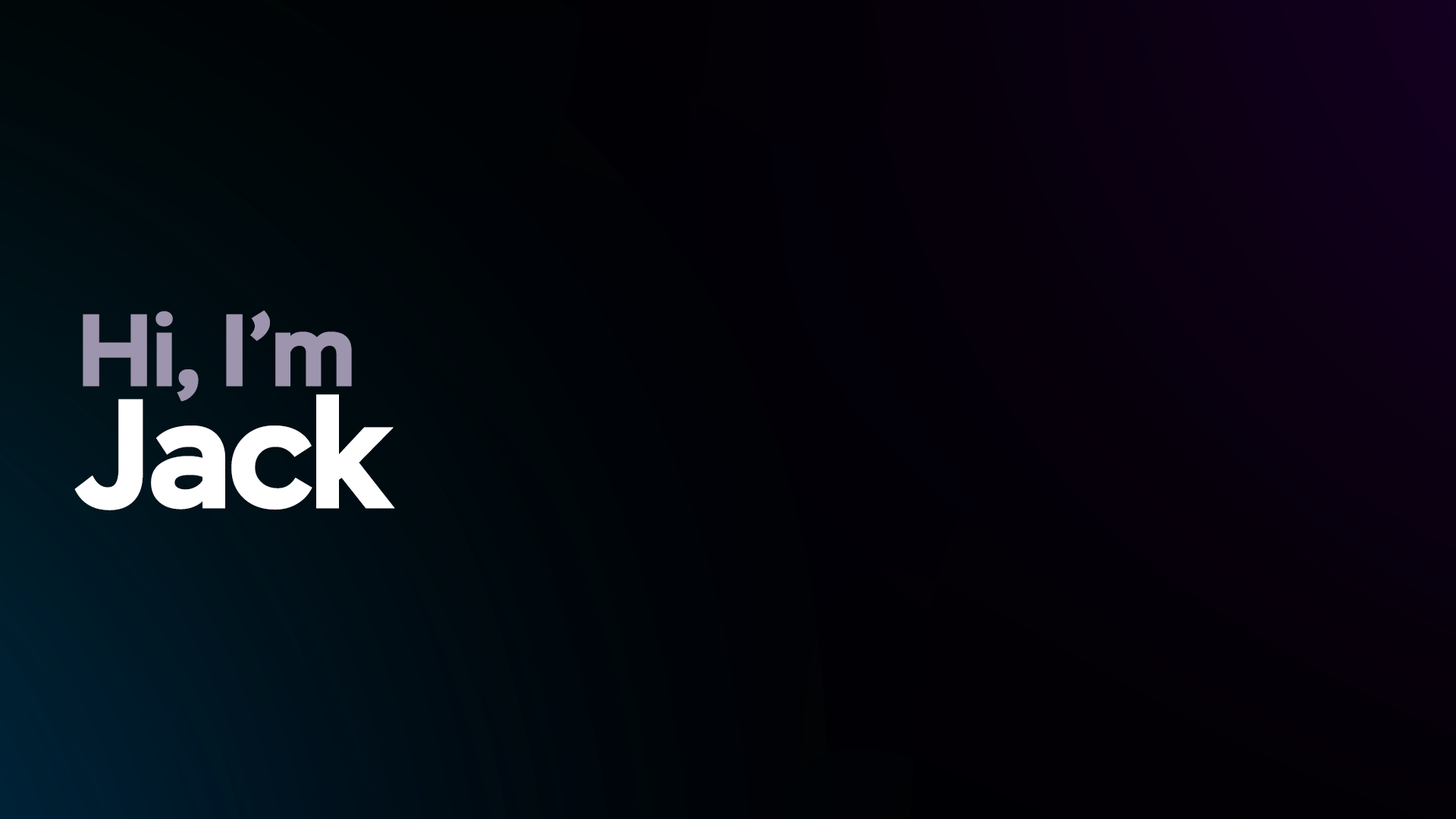
<style>
.page{position:relative;width:1456px;height:819px}
.page>*{position:absolute;margin:0}
.t1{font:102.4px/97.8px "Stem-Bold";letter-spacing:-0.02em;color:#9d94ad}
.t2{font:155.5px/122.1px "Stem-Bold";letter-spacing:-0.02em;color:#ffffff}
</style>
<div class="page">
<p class="t1" style="left:74px;top:310px;width:321px;height:200px">Hi, I’m<br><span class="t2">Jack</span></p>
</div>
